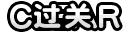
<style>
.page{position:relative;width:128px;height:32px;background:#ffffff}
.page>*{position:absolute;margin:0}
.t1{font:26.7px "DFPYuanW9";letter-spacing:0.1em;color:#ededed;scale:1.05 1}
</style>
<div class="page">
<p class="t1" style="left:34px;top:3px;width:57px;height:26px">过关</p>
</div>
